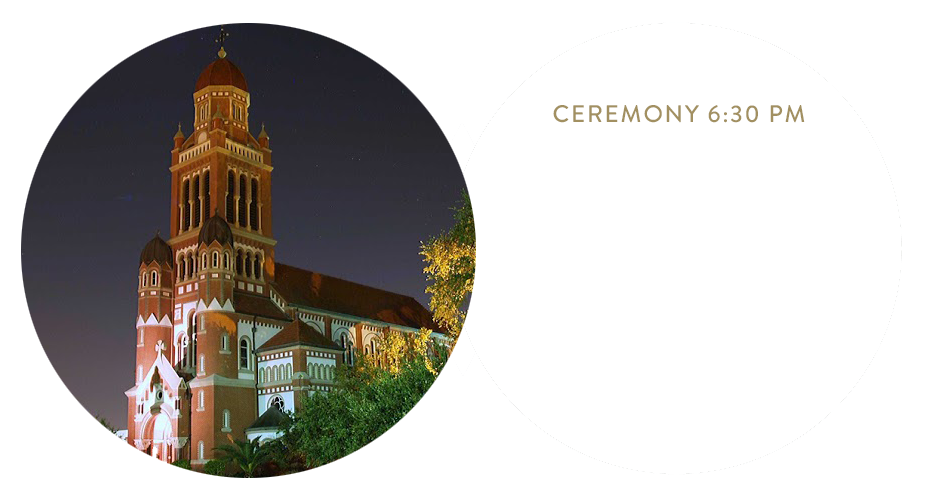
<style>
.page{position:relative;width:925px;height:499px;background:#ffffff}
.page>*{position:absolute;margin:0}
.t1{font:24px "BrandonGrotesque-Medium";letter-spacing:0.075em;color:#a29061}
</style>
<div class="page">
<p class="t1" style="left:553px;top:105px;width:252px;height:18px">CEREMONY 6:30 PM</p>
</div>
